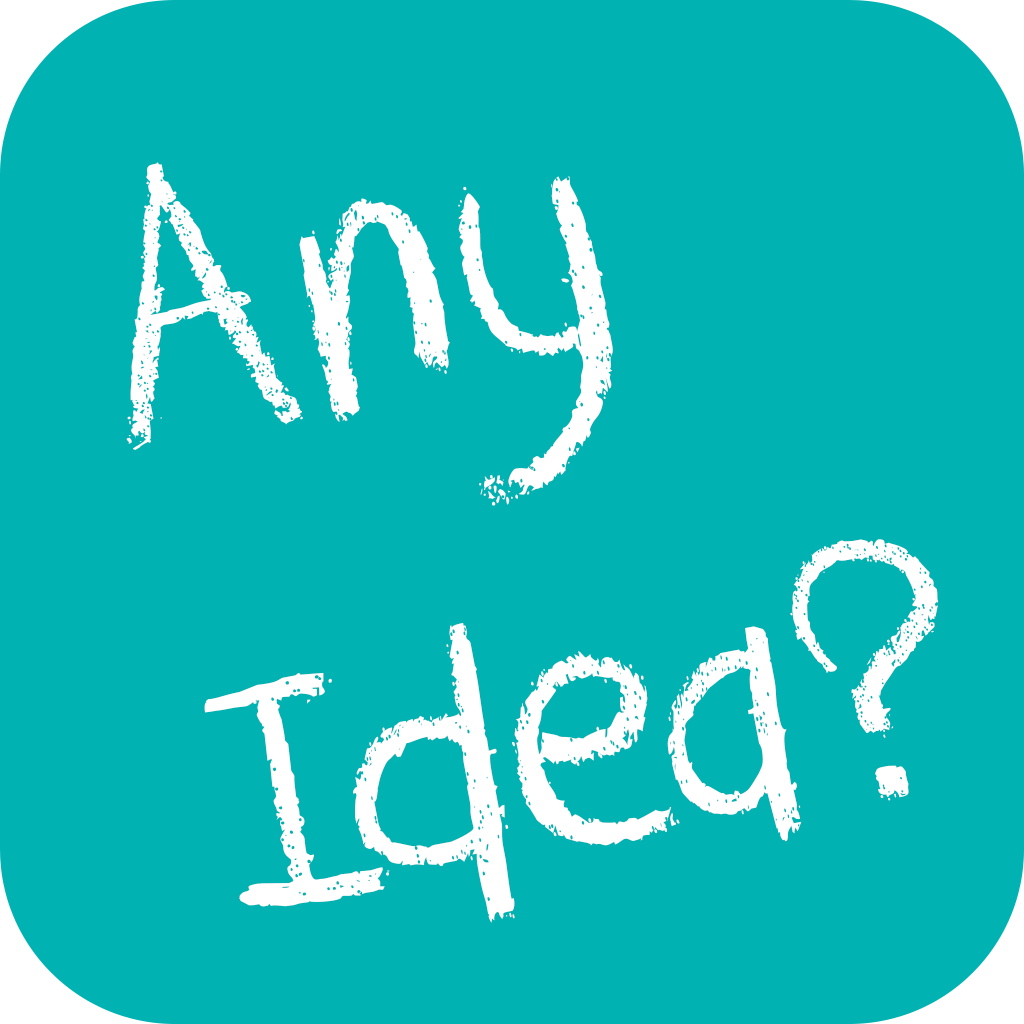
<style>
.page{position:relative;width:1024px;height:1024px;background:#00b2b2}
.page>*{position:absolute;margin:0}
.t1{font:400px "DKCrayonCrumble";color:#ffffff}
.t2{font:372px "DKCrayonCrumble";color:#ffffff}
</style>
<div class="page">
<p class="t1" style="left:126px;top:162px;width:813px;height:761px;rotate:-11deg"><span class="t2">  </span>Any       <br>  Idea?</p>
</div>
